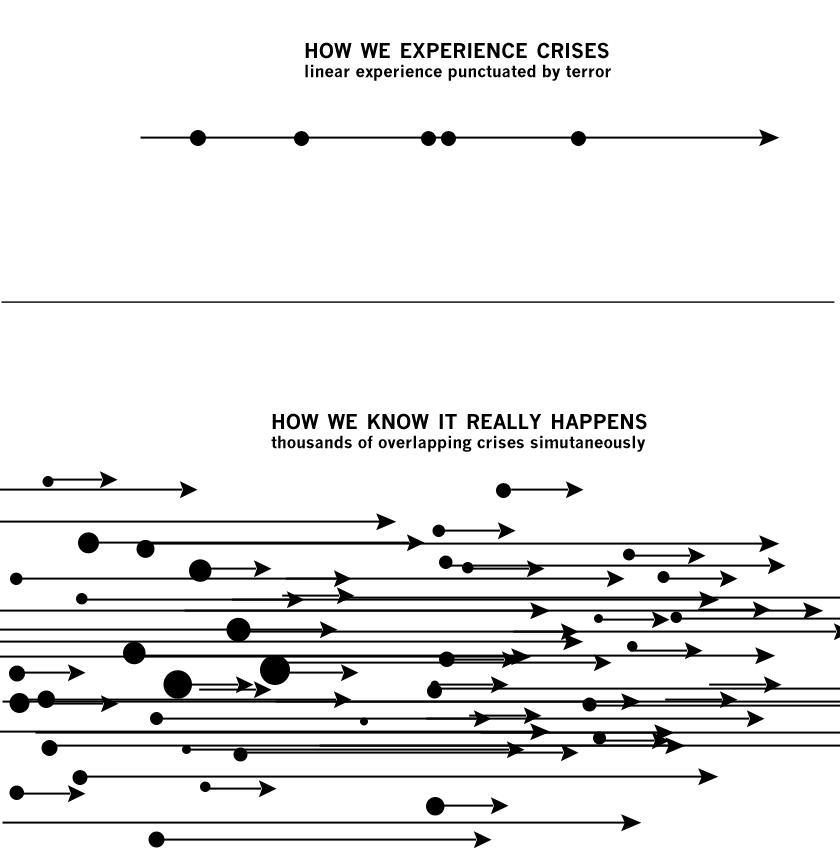
<style>
.page{position:relative;width:840px;height:848px;background:#ffffff}
.page>*{position:absolute;margin:0}
.t1{font:16.5px/19.3px "NewsGothicMT-Bold";color:#000000}
.t2{font:28.5px/49.4px "NewsGothicMT-Bold";color:#000000;font-variant:small-caps}
</style>
<div class="page">
<p class="t1" style="left:305px;top:42px;width:306px;height:39px"><span class="t2">how we experience crises<br></span>linear experience punctuated by terror</p>
<p class="t1" style="left:271px;top:413px;width:376px;height:39px"><span class="t2">how we know it really happens<br></span>thousands of overlapping crises simutaneously</p>
</div>
